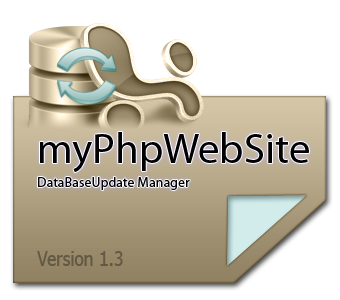
<style>
.page{position:relative;width:340px;height:300px;background:#ffffff}
.page>*{position:absolute;margin:0}
.t1{font:14px/24px "MyriadPro-Regular";color:#000000}
.t2{font:42.8px/24px "MyriadPro-Regular";color:#000000}
.t3{font:20.3px "Nina";color:#625944}
</style>
<div class="page">
<p class="t1" style="left:38px;top:132px;width:271px;height:58px"><span class="t2">myPhpWebSite<br></span>DataBaseUpdate Manager</p>
<p class="t3" style="left:37px;top:251px;width:86px;height:15px">Version 1.3</p>
</div>
